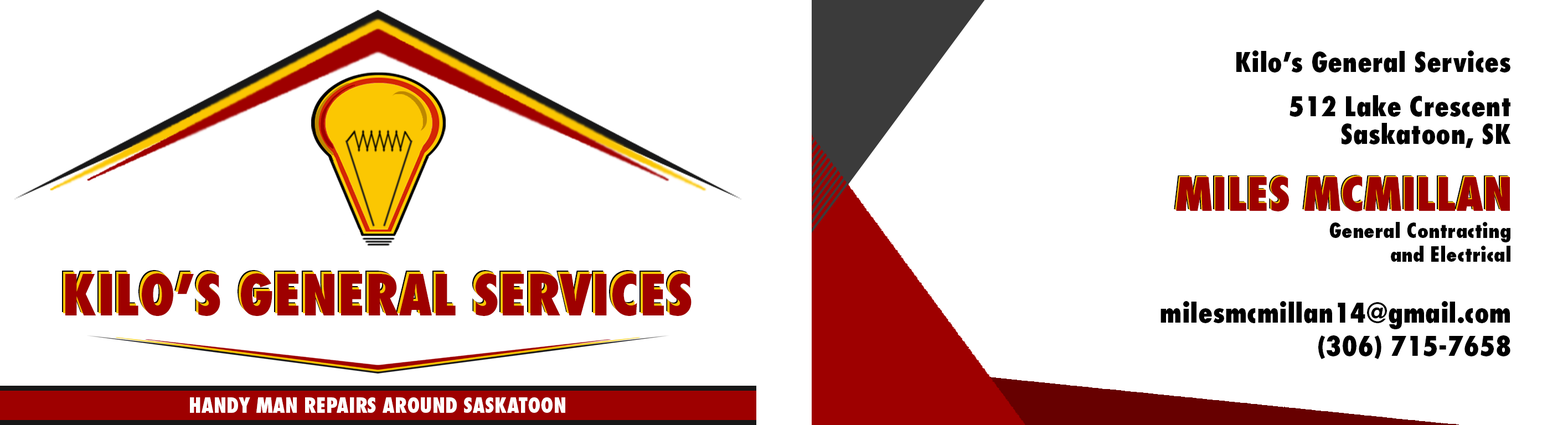
<style>
.page{position:relative;width:1568px;height:425px;background:#ffffff}
.page>*{position:absolute;margin:0}
.t1{font:26.6px "Futura-CondensedExtraBold";color:#000000}
.t2{font:44.8px "Futura-CondensedExtraBold";color:#9e0000}
.t3{font:19.9px "Futura-CondensedExtraBold";color:#000000}
.t4{font:55.4px "Futura-CondensedExtraBold"}
.t5{font:55.4px "Futura-CondensedExtraBold";color:#9e0000}
.t6{font:19.9px "Futura-CondensedExtraBold";color:#ffffff}
</style>
<div class="page">
<p class="t1" style="left:1236px;top:50px;width:274px;height:23px">Kilo’s General Services</p>
<p class="t1" style="left:1290px;top:95px;width:220px;height:22px">512 Lake Crescent</p>
<p class="t1" style="left:1341px;top:123px;width:170px;height:25px">Saskatoon, SK</p>
<p class="t2" style="left:1174px;top:175px;width:334px;height:35px">MILES MCMILLAN</p>
<p class="t2" style="left:1175px;top:176px;width:334px;height:34px">MILES MCMILLAN</p>
<p class="t2" style="left:1176px;top:177px;width:334px;height:35px">MILES MCMILLAN</p>
<p class="t3" style="left:1329px;top:222px;width:181px;height:40px;text-align:right">General Contracting <br>and Electrical</p>
<p class="t4" style="left:62px;top:270px;width:626px;height:43px">KILO’S GENERAL SERVICES</p>
<p class="t5" style="left:63px;top:271px;width:626px;height:43px">KILO’S GENERAL SERVICES</p>
<p class="t5" style="left:65px;top:274px;width:627px;height:42px">KILO’S GENERAL SERVICES</p>
<p class="t1" style="left:1160px;top:301px;width:350px;height:28px">milesmcmillan14@gmail.com</p>
<p class="t1" style="left:1318px;top:336px;width:192px;height:23px">(306) 715-7658</p>
<p class="t6" style="left:190px;top:398px;width:375px;height:15px">HANDY MAN REPAIRS AROUND SASKATOON</p>
</div>
